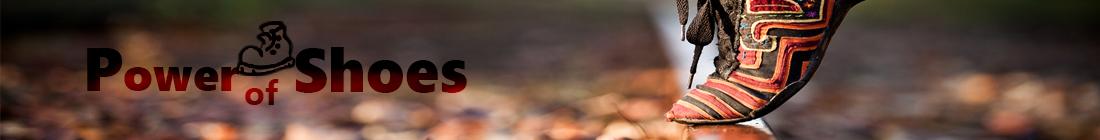
<style>
.page{position:relative;width:1100px;height:140px}
.page>*{position:absolute;margin:0}
.t1{font:47px "SegoeUIBlack"}
.t2{font:61px "SegoeUIBlack"}
.t3{font:34px "SegoeUI-Bold"}
</style>
<div class="page">
<p class="t1" style="left:87px;top:48px;width:152px;height:43px"><span class="t2">P</span>ower</p>
<p class="t2" style="left:295px;top:47px;width:172px;height:46px">Shoes</p>
<p class="t3" style="left:245px;top:79px;width:34px;height:26px">of</p>
</div>
